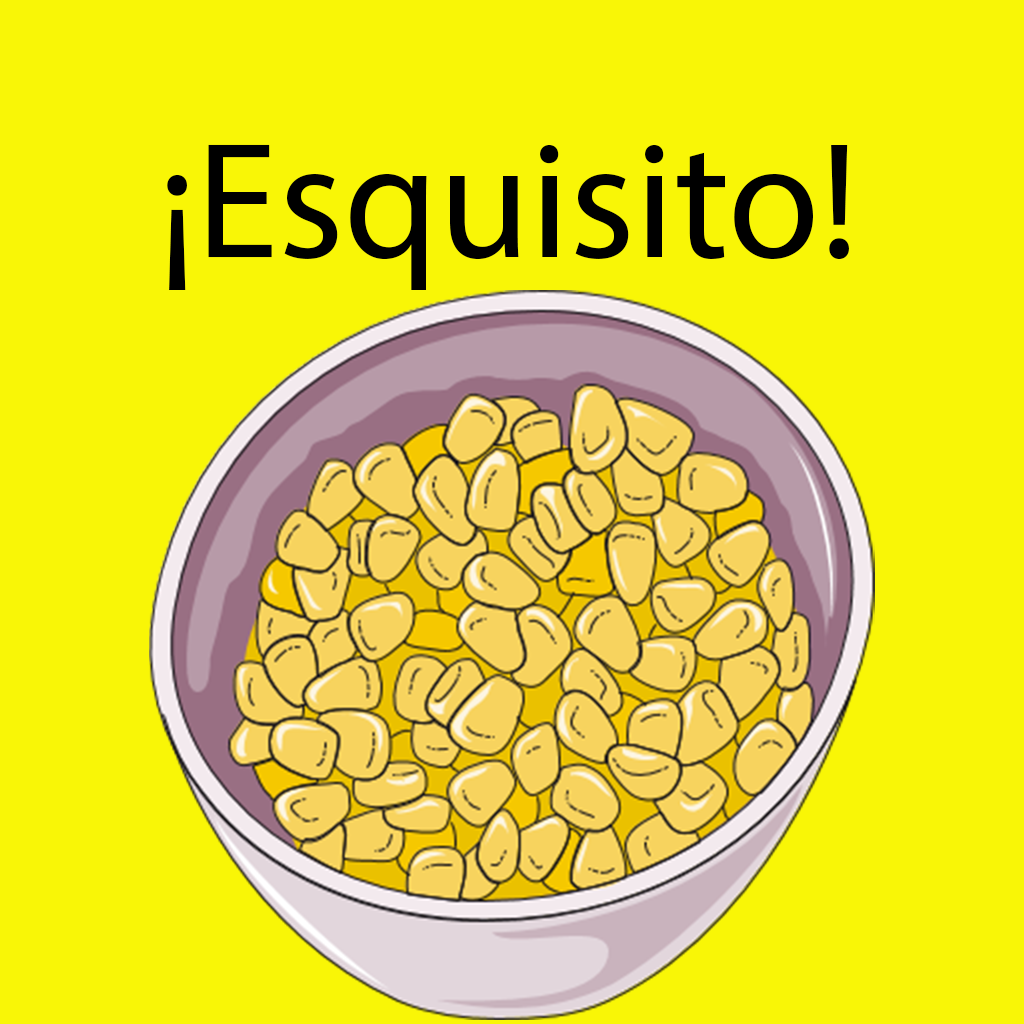
<style>
.page{position:relative;width:1024px;height:1024px;background:#f9f606}
.page>*{position:absolute;margin:0}
.t1{font:166.7px "MyriadPro-Regular";color:#000000}
</style>
<div class="page">
<p class="t1" style="left:167px;top:144px;width:682px;height:146px">¡Esquisito!</p>
</div>
